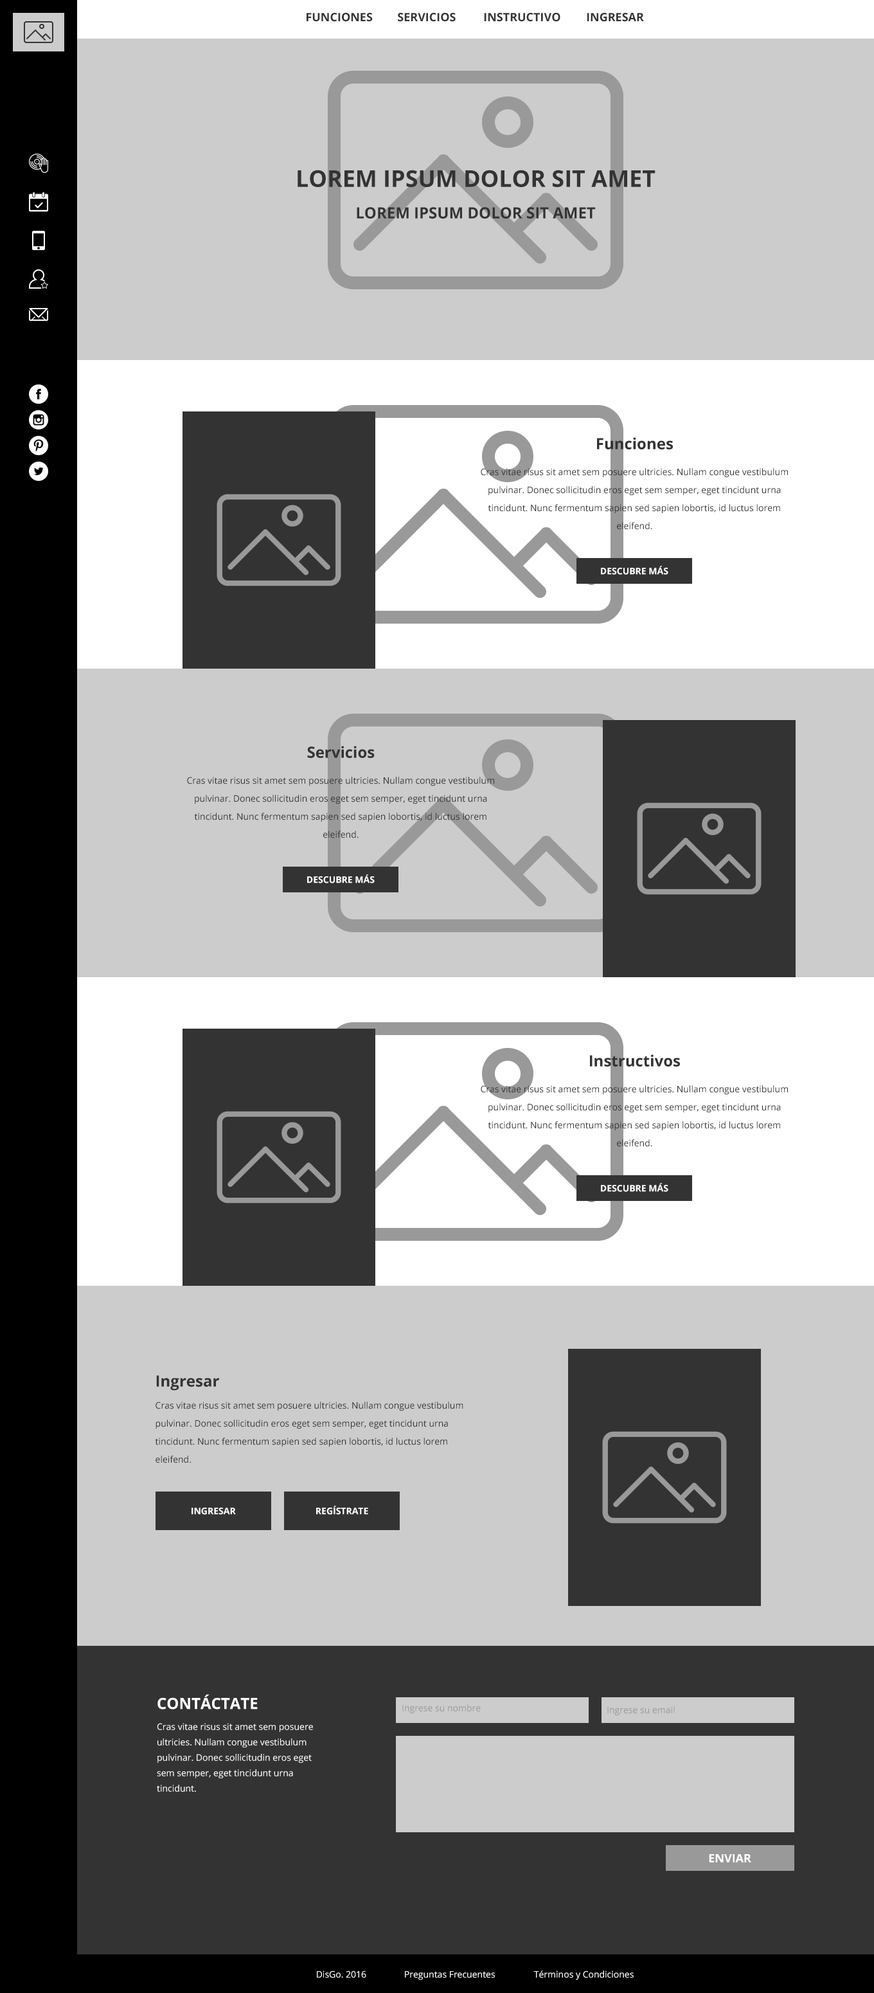
<style>
.page{position:relative;width:874px;height:1993px;background:#cccccc}
.page>*{position:absolute;margin:0}
.t1{font:11.6px "OpenSans-Bold";color:#333333;text-transform:uppercase}
.t2{font:23.1px "OpenSans-Bold";color:#333333;text-transform:uppercase}
.t3{font:15.4px "OpenSans-Bold";color:#333333;text-transform:uppercase}
.t4{font:15.4px "OpenSans-Bold";color:#333333}
.t5{font:9px/18px "OpenSans";color:#333333}
.t6{font:9px "OpenSans-Bold";color:#ffffff;text-transform:uppercase}
.t7{font:15.4px "OpenSans-Bold";color:#ffffff;text-transform:uppercase}
.t8{font:9px "OpenSans";color:#999999}
.t9{font:9px/15.4px "OpenSans";color:#ffffff}
.t10{font:11.6px "OpenSans-Bold";color:#ffffff;text-transform:uppercase}
.t11{font:9px "OpenSans";color:#ffffff}
</style>
<div class="page">
<p class="t1" style="left:307px;top:13px;width:66px;height:9px">Funciones</p>
<p class="t1" style="left:398px;top:13px;width:58px;height:9px">Servicios</p>
<p class="t1" style="left:484px;top:13px;width:77px;height:9px">Instructivo</p>
<p class="t1" style="left:587px;top:13px;width:57px;height:9px">Ingresar</p>
<p class="t2" style="left:298px;top:170px;width:358px;height:17px">Lorem ipsum dolor sit amet</p>
<p class="t3" style="left:357px;top:207px;width:239px;height:12px">Lorem ipsum dolor sit amet</p>
<p class="t4" style="left:597px;top:437px;width:76px;height:12px">Funciones</p>
<p class="t5" style="left:481px;top:468px;width:307px;height:62px;text-align:center">Cras vitae risus sit amet sem posuere ultricies. Nullam congue vestibulum pulvinar. Donec sollicitudin eros eget sem semper, eget tincidunt urna tincidunt. Nunc fermentum sapien sed sapien lobortis, id luctus lorem eleifend.</p>
<p class="t6" style="left:601px;top:566px;width:68px;height:9px">Descubre Más</p>
<p class="t4" style="left:307px;top:746px;width:68px;height:12px">Servicios</p>
<p class="t5" style="left:187px;top:777px;width:307px;height:61px;text-align:center">Cras vitae risus sit amet sem posuere ultricies. Nullam congue vestibulum pulvinar. Donec sollicitudin eros eget sem semper, eget tincidunt urna tincidunt. Nunc fermentum sapien sed sapien lobortis, id luctus lorem eleifend.</p>
<p class="t6" style="left:307px;top:874px;width:68px;height:9px">Descubre Más</p>
<p class="t4" style="left:590px;top:1054px;width:90px;height:12px">Instructivos</p>
<p class="t5" style="left:481px;top:1085px;width:307px;height:62px;text-align:center">Cras vitae risus sit amet sem posuere ultricies. Nullam congue vestibulum pulvinar. Donec sollicitudin eros eget sem semper, eget tincidunt urna tincidunt. Nunc fermentum sapien sed sapien lobortis, id luctus lorem eleifend.</p>
<p class="t6" style="left:601px;top:1183px;width:68px;height:9px">Descubre Más</p>
<p class="t4" style="left:156px;top:1375px;width:63px;height:15px">Ingresar</p>
<p class="t5" style="left:155px;top:1401px;width:309px;height:62px">Cras vitae risus sit amet sem posuere ultricies. Nullam congue vestibulum pulvinar. Donec sollicitudin eros eget sem semper, eget tincidunt urna tincidunt. Nunc fermentum sapien sed sapien lobortis, id luctus lorem eleifend.</p>
<p class="t6" style="left:316px;top:1506px;width:52px;height:9px">Regístrate</p>
<p class="t6" style="left:192px;top:1508px;width:44px;height:7px">Ingresar</p>
<p class="t7" style="left:158px;top:1694px;width:100px;height:15px">Contáctate</p>
<p class="t8" style="left:402px;top:1704px;width:79px;height:9px">Ingrese su nombre</p>
<p class="t8" style="left:608px;top:1706px;width:67px;height:9px">Ingrese su email</p>
<p class="t9" style="left:157px;top:1723px;width:156px;height:69px">Cras vitae risus sit amet sem posuere ultricies. Nullam congue vestibulum pulvinar. Donec sollicitudin eros eget sem semper, eget tincidunt urna tincidunt.</p>
<p class="t10" style="left:709px;top:1854px;width:43px;height:8px">Enviar</p>
<p class="t11" style="left:317px;top:1970px;width:49px;height:8px">DisGo. 2016</p>
<p class="t11" style="left:405px;top:1971px;width:90px;height:9px">Preguntas Frecuentes</p>
<p class="t11" style="left:534px;top:1970px;width:100px;height:10px">Términos y Condiciones</p>
</div>
